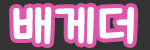
<style>
.page{position:relative;width:150px;height:50px;background:#333333}
.page>*{position:absolute;margin:0}
.t1{font:46px "MaplestoryLight";color:#ffffff;font-weight:bold}
</style>
<div class="page">
<p class="t1" style="left:13px;top:6px;width:121px;height:38px">배게더</p>
</div>
